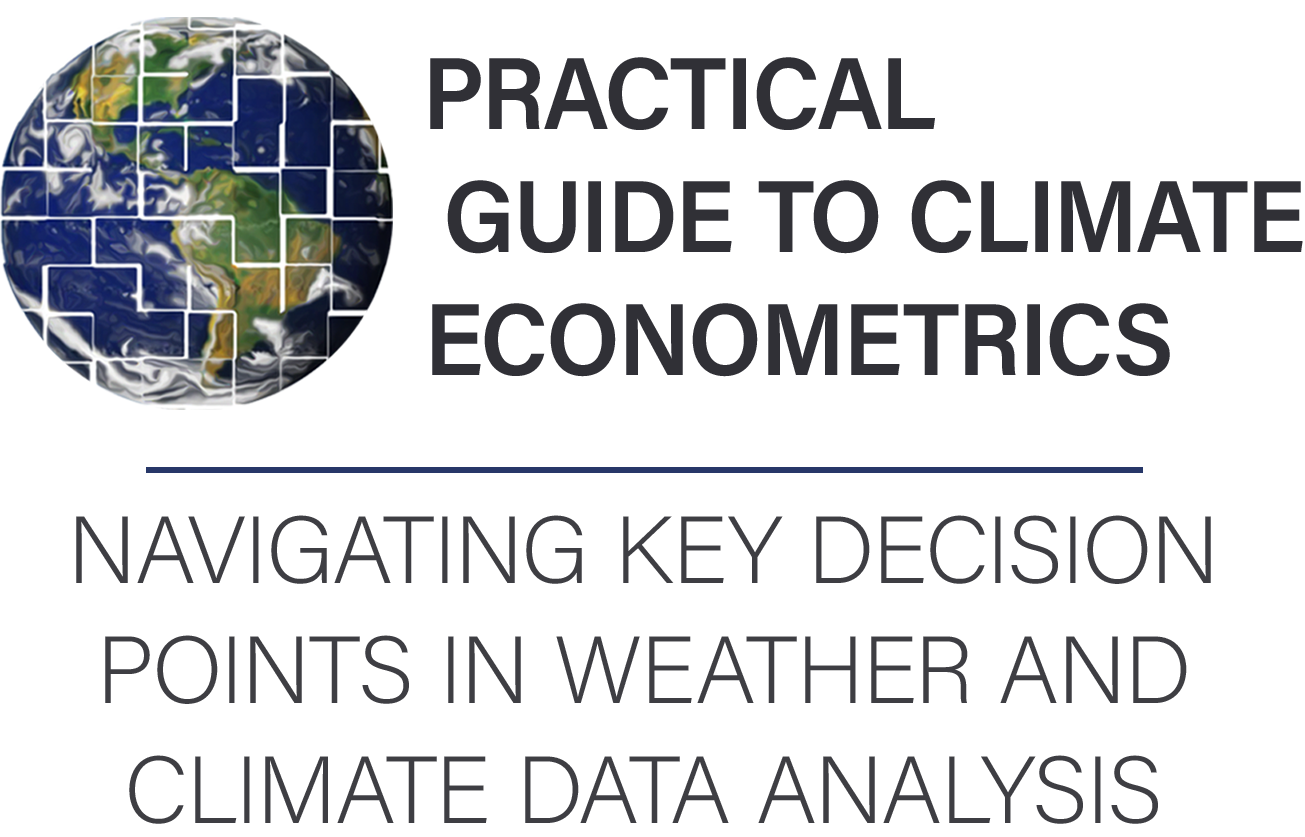
<style>
.page{position:relative;width:1305px;height:837px;background:#ffffff}
.page>*{position:absolute;margin:0}
.t1{font:102.1px/123px "AcuminConcept-Semibold";color:#303036;text-transform:uppercase;font-weight:bold;scale:0.95 1}
.t2{font:95px/120px "AcuminConcept-ExtraLight";color:#3e3e43;text-transform:uppercase;font-weight:bold}
</style>
<div class="page">
<p class="t1" style="left:430px;top:57px;width:873px;height:320px">Practical <br>guide to climate <br>econometrics</p>
<p class="t2" style="left:76px;top:515px;width:1135px;height:309px;text-align:center">Navigating key decision <br>points in weather and <br>climate data analysis</p>
</div>
